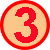
<style>
.page{position:relative;width:50px;height:50px;background:#fdc689}
.page>*{position:absolute;margin:0}
.t1{font:49.8px "Arial-BoldMT";color:#f90723}
</style>
<div class="page">
<p class="t1" style="left:14px;top:7px;width:24px;height:36px">3</p>
</div>
